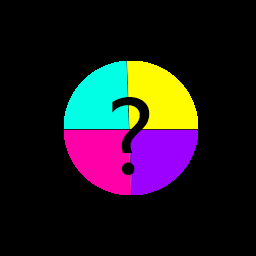
<style>
.page{position:relative;width:256px;height:256px;background:#000000}
.page>*{position:absolute;margin:0}
.t1{font:100px "MicrosoftYaHei";color:#000000}
</style>
<div class="page">
<p class="t1" style="left:112px;top:97px;width:38px;height:78px">?</p>
</div>
